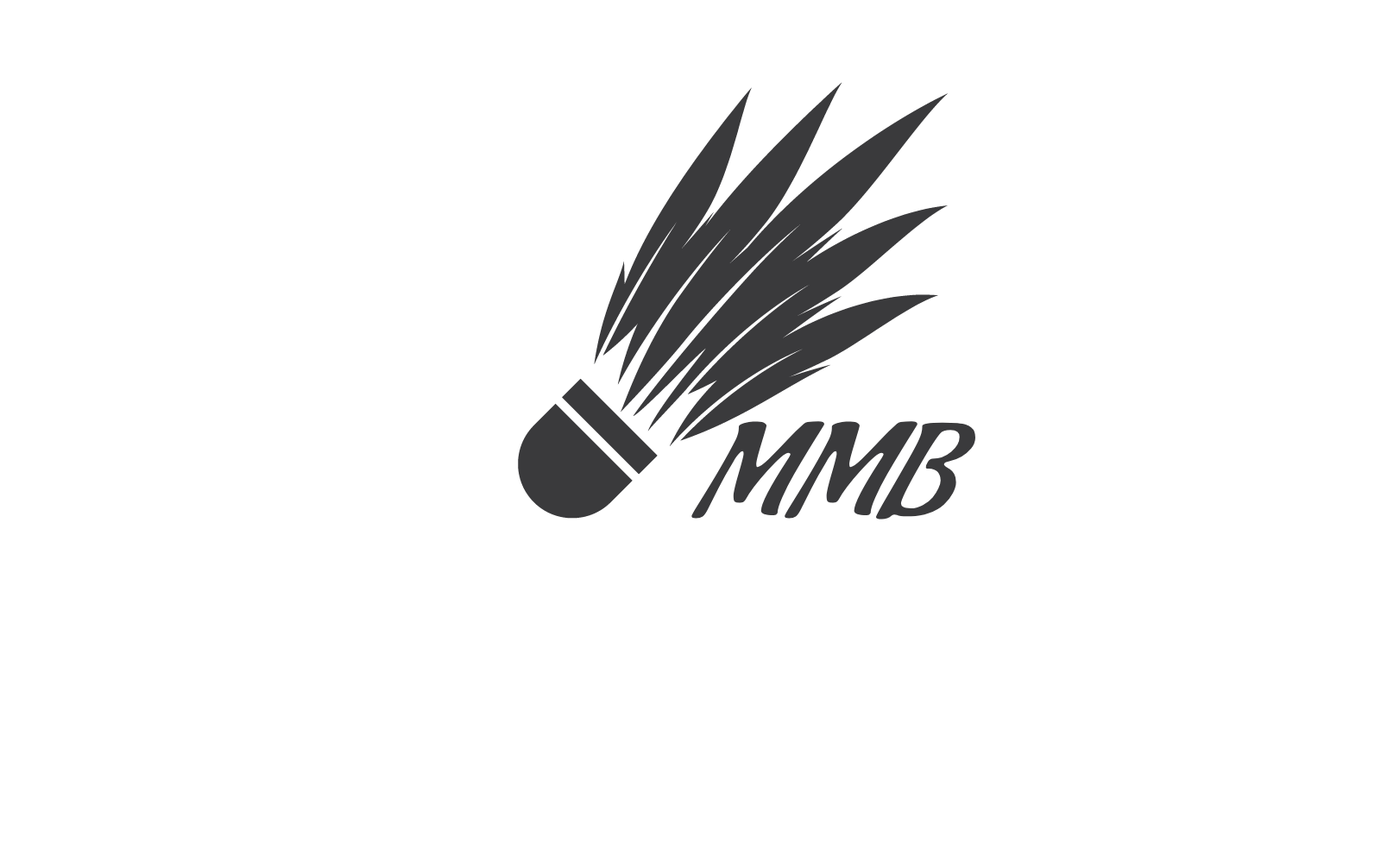
<style>
.page{position:relative;width:1381px;height:863px;background:#ffffff}
.page>*{position:absolute;margin:0}
.t1{font:129.5px "Condiment-Regular";color:#3a3a3c}
</style>
<div class="page">
<p class="t1" style="left:691px;top:421px;width:285px;height:99px">MMB</p>
</div>
